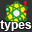
<style>
.page{position:relative;width:32px;height:32px;background:#333333}
.page>*{position:absolute;margin:0}
.t1{font:12px "Arial-BoldMT";color:#ffffff}
</style>
<div class="page">
<p class="t1" style="left:0px;top:20px;width:32px;height:11px">types</p>
</div>
